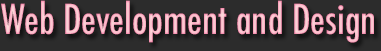
<style>
.page{position:relative;width:381px;height:51px;background:#2c2c2c}
.page>*{position:absolute;margin:0}
.t1{font:40px "Futura-CondensedMedium";color:#fabecb}
</style>
<div class="page">
<p class="t1" style="left:1px;top:0px;width:373px;height:43px">Web Development and Design</p>
</div>
